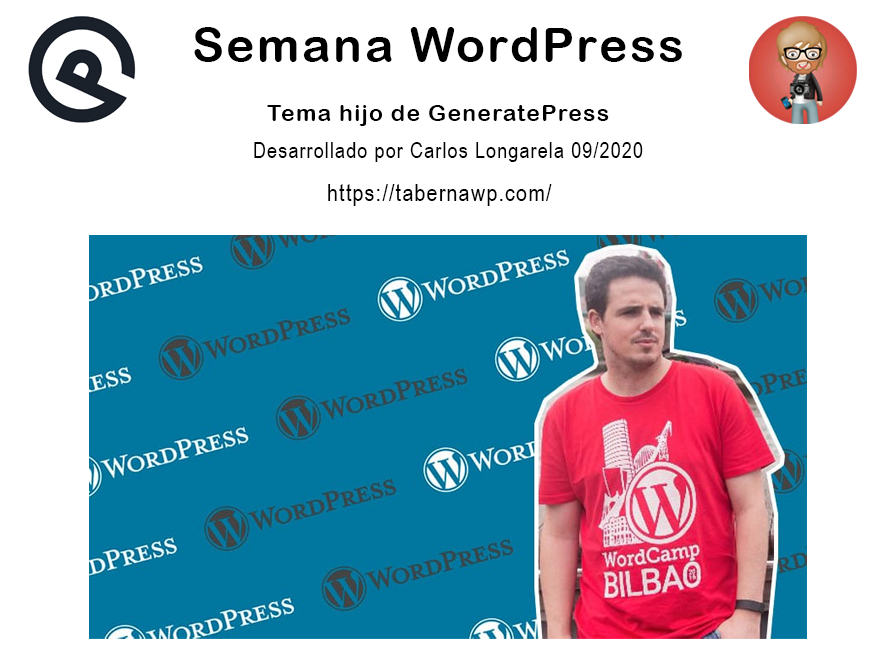
<style>
.page{position:relative;width:880px;height:660px;background:#ffffff}
.page>*{position:absolute;margin:0}
.t1{font:48px "ArialRoundedMTBold";letter-spacing:0.05em;color:#000000}
.t2{font:23px "ArialRoundedMTBold";letter-spacing:0.05em;color:#000000}
.t3{font:22px "ArialNarrow";letter-spacing:0.05em;color:#000000}
.t4{font:24px "ArialNarrow";letter-spacing:0.05em;color:#000000}
</style>
<div class="page">
<p class="t1" style="left:194px;top:27px;width:488px;height:35px">Semana WordPress</p>
<p class="t2" style="left:267px;top:105px;width:342px;height:21px">Tema hijo de GeneratePress</p>
<p class="t3" style="left:254px;top:142px;width:389px;height:20px">Desarrollado por Carlos Longarela 09/2020</p>
<p class="t4" style="left:328px;top:184px;width:224px;height:22px">https://tabernawp.com/</p>
</div>
